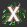
<style>
.page{position:relative;width:27px;height:27px;background:#333333}
.page>*{position:absolute;margin:0}
.t1{font:22.8px "BlenderPro-Bold";color:#f5f5f5}
</style>
<div class="page">
<p class="t1" style="left:7px;top:7px;width:13px;height:14px">X</p>
</div>
